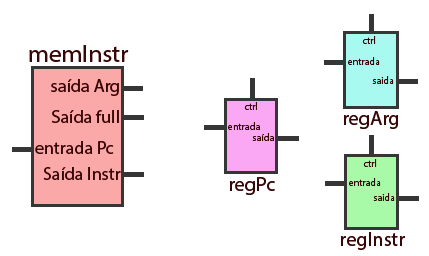
<style>
.page{position:relative;width:429px;height:256px;background:#ffffff}
.page>*{position:absolute;margin:0}
.t1{font:25px "MyriadHebrew-Regular";color:#370707}
.t2{font:18px "MyriadHebrew-Regular";color:#370707}
.t3{font:10px "MyriadHebrew-Regular";color:#370707}
.t4{font:20px "MyriadHebrew-Regular";color:#370707}
</style>
<div class="page">
<p class="t1" style="left:29px;top:45px;width:100px;height:17px">memInstr</p>
<p class="t2" style="left:51px;top:79px;width:68px;height:17px">saída Arg</p>
<p class="t3" style="left:244px;top:102px;width:13px;height:8px">ctrl</p>
<p class="t2" style="left:52px;top:110px;width:67px;height:13px">Saída full</p>
<p class="t4" style="left:343px;top:111px;width:55px;height:18px">regArg</p>
<p class="t3" style="left:228px;top:122px;width:32px;height:8px">entrada</p>
<p class="t3" style="left:252px;top:133px;width:22px;height:8px">saída</p>
<p class="t2" style="left:35px;top:141px;width:79px;height:13px">entrada Pc</p>
<p class="t2" style="left:43px;top:167px;width:78px;height:13px">Saída Instr</p>
<p class="t4" style="left:229px;top:177px;width:46px;height:18px">regPc</p>
<p class="t4" style="left:340px;top:232px;width:65px;height:18px">regInstr</p>
</div>
